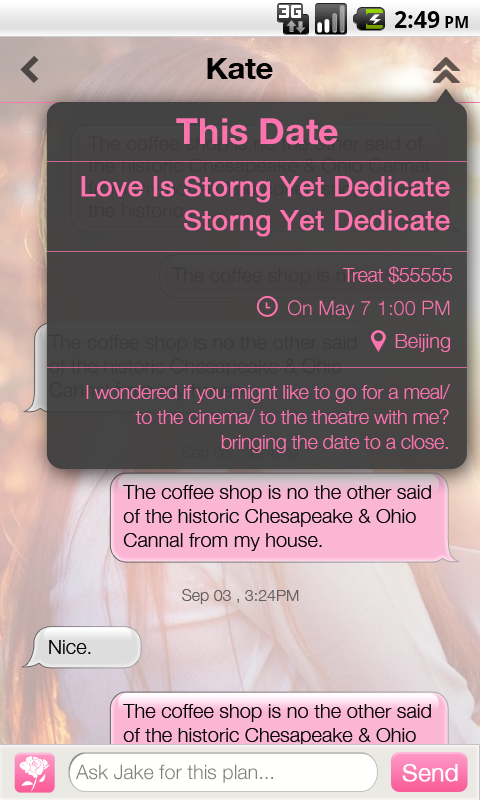
<style>
.page{position:relative;width:480px;height:800px}
.page>*{position:absolute;margin:0}
.t1{font:30px "HelveticaNeue-Bold";color:#000000}
.t2{font:36px "HelveticaNeue-Bold";color:#fc73ae}
.t3{font:28px "HelveticaNeue";color:#fc73ae;font-weight:bold}
.t4{font:20px "HelveticaNeue-Light";color:#3a3a3a}
.t5{font:20px "HelveticaNeue-Light";letter-spacing:-0.02em;color:#fc73ae}
.t6{font:20px "HelveticaNeue-Light";color:#fc73ae}
.t7{font:20px/25px "HelveticaNeue-Light";letter-spacing:-0.02em;color:#fc73ae}
.t8{font:20px "HelveticaNeue-Light";color:#040404}
.t9{font:16px "HelveticaNeue-Light";color:#626262}
.t10{font:20px "HelveticaNeue-Light";color:#7f7f7e}
.t11{font:24px "HelveticaNeue-Light";color:#ffffff;font-weight:bold}
</style>
<div class="page">
<p class="t1" style="left:207px;top:58px;width:66px;height:21px">Kate</p>
<p class="t2" style="left:176px;top:118px;width:162px;height:27px">This Date</p>
<p class="t3" style="left:81px;top:176px;width:369px;height:61px;text-align:right">Love Is Storng Yet Dedicate<br>Storng Yet Dedicate</p>
<p class="t4" style="left:172px;top:267px;width:189px;height:19px">The coffee shop is no.</p>
<p class="t5" style="left:342px;top:266px;width:110px;height:18px">Treat $55555</p>
<p class="t6" style="left:288px;top:300px;width:162px;height:19px">On May 7 1:00 PM</p>
<p class="t6" style="left:395px;top:334px;width:55px;height:18px">Beijing</p>
<p class="t7" style="left:86px;top:384px;width:364px;height:69px;text-align:right">I wondered if you mignt like to go for a meal/ to the cinema/ to the theatre with me? bringing the date to a close.</p>
<p class="t8" style="left:123px;top:485px;width:308px;height:66px">The coffee shop is no the other said of the historic Chesapeake &amp; Ohio Cannal from my house.</p>
<p class="t9" style="left:182px;top:589px;width:117px;height:15px">Sep 03 , 3:24PM</p>
<p class="t8" style="left:49px;top:640px;width:42px;height:14px">Nice.</p>
<p class="t8" style="left:123px;top:704px;width:308px;height:66px">The coffee shop is no the other said of the historic Chesapeake &amp; Ohio Cannal from my house.</p>
<p class="t10" style="left:76px;top:764px;width:197px;height:19px">Ask Jake for this plan...</p>
<p class="t11" style="left:402px;top:764px;width:56px;height:18px">Send</p>
</div>
